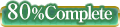
<style>
.page{position:relative;width:120px;height:27px;background:#ffffff}
.page>*{position:absolute;margin:0}
.t1{font:18px "RyuminPro-ExBold";letter-spacing:-0.08em;color:#ffffff}
.t2{font:23.8px "TimesNewRomanPSMT";color:#ffffff;scale:1.05 1}
.t3{font:16px "RyuminPro-ExBold";color:#ffffff}
</style>
<div class="page">
<p class="t1" style="left:8px;top:3px;width:104px;height:20px"><span class="t2">80</span><span class="t3">%</span>Complete</p>
</div>
